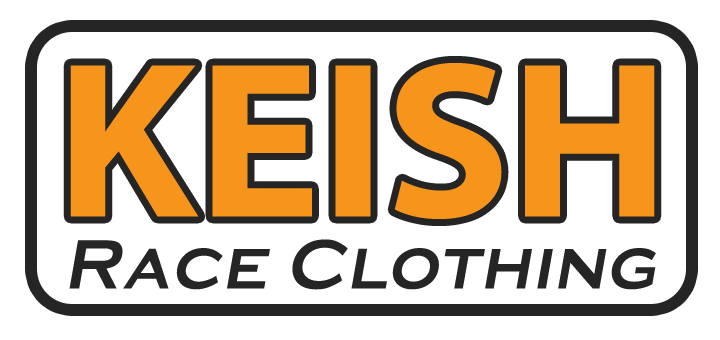
<style>
.page{position:relative;width:720px;height:340px;background:#ffffff}
.page>*{position:absolute;margin:0}
.t1{font:224px "MyriadWebPro-Bold";color:#f7941c}
.t2{font:72px "Media-Gothic";color:#252525;font-style:italic}
</style>
<div class="page">
<p class="t1" style="left:70px;top:63px;width:585px;height:156px">KEISH</p>
<p class="t2" style="left:69px;top:239px;width:587px;height:51px">Race Clothing</p>
</div>
